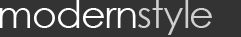
<style>
.page{position:relative;width:241px;height:37px;background:#333333}
.page>*{position:absolute;margin:0}
.t1{font:38px "CenturyGothic";letter-spacing:-0.025em;color:#ffffff}
.t2{font:38px "CenturyGothic";letter-spacing:-0.025em;color:#cfcfcf}
</style>
<div class="page">
<p class="t1" style="left:0px;top:0px;width:212px;height:35px">modern<span class="t2">style</span></p>
</div>
